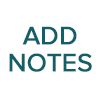
<style>
.page{position:relative;width:100px;height:100px;background:#ffffff}
.page>*{position:absolute;margin:0}
.t1{font:26px/27px "ProximaNova-Regular";letter-spacing:-0.007em;color:#116069;font-weight:bold}
</style>
<div class="page">
<p class="t1" style="left:9px;top:26px;width:83px;height:46px;text-align:center">ADD<br>NOTES</p>
</div>
